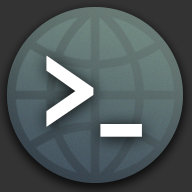
<style>
.page{position:relative;width:192px;height:192px}
.page>*{position:absolute;margin:0}
.t1{font:127.1px "Raleway-SemiBold";letter-spacing:-0.025em;color:#ffffff;scale:0.87 1}
</style>
<div class="page">
<p class="t1" style="left:46px;top:55px;width:96px;height:82px">&gt;_</p>
</div>
